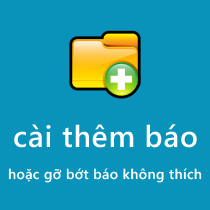
<style>
.page{position:relative;width:210px;height:210px;background:#0993bb}
.page>*{position:absolute;margin:0}
.t1{font:30px "SegoeWP-Semibold";letter-spacing:0.025em;color:#ffffff}
.t2{font:14px "SegoeWP-Semibold";letter-spacing:0.025em;color:#fefefe}
</style>
<div class="page">
<p class="t1" style="left:14px;top:124px;width:183px;height:24px">cài thêm báo</p>
<p class="t2" style="left:8px;top:168px;width:194px;height:15px">hoặc gỡ bớt báo không thích</p>
</div>
